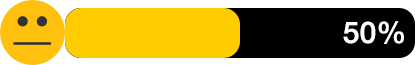
<style>
.page{position:relative;width:415px;height:65px;background:#ffcc00}
.page>*{position:absolute;margin:0}
.t1{font:30px "HelveticaNeueCyr-Medium";color:#ffffff}
</style>
<div class="page">
<p class="t1" style="left:343px;top:21px;width:61px;height:23px">50%</p>
</div>
